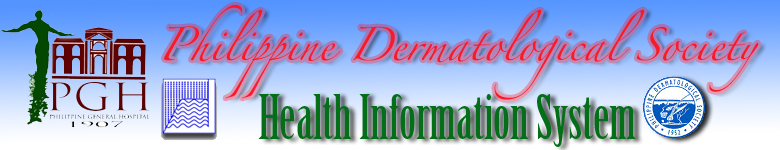
<style>
.page{position:relative;width:780px;height:150px}
.page>*{position:absolute;margin:0}
.t1{font:30px "Zapfino";color:#fa1928}
.t2{font:60px "BirchStd";color:#056e19}
</style>
<div class="page">
<p class="t1" style="left:164px;top:5px;width:595px;height:95px">Philippine Dermatological Society</p>
<p class="t2" style="left:258px;top:94px;width:378px;height:53px">Health Information System</p>
</div>
